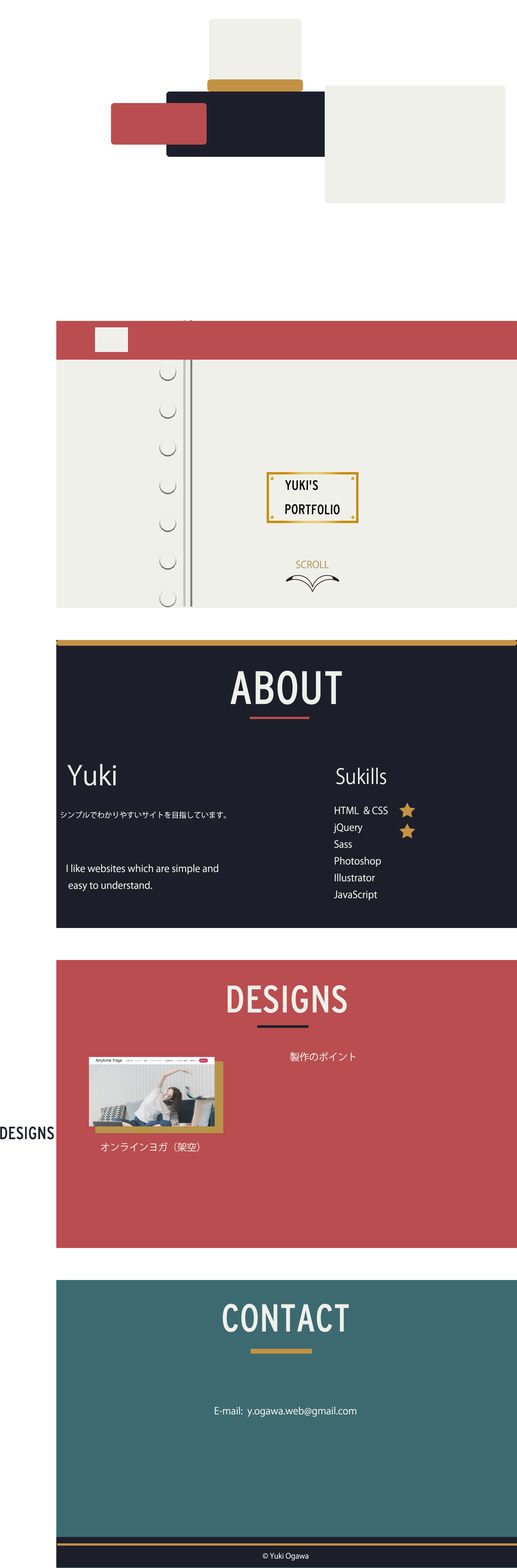
<style>
.page{position:relative;width:517px;height:1568px;background:#ffffff}
.page>*{position:absolute;margin:0}
.t1{font:9.6px "KozGoPr6N-Regular";color:#b5944a}
.t2{font:26.5px "KozGoPr6N-Regular";color:#eff0ea}
.t3{font:9.6px "KozGoPr6N-Regular";color:#eff0ea}
.t4{font:7.4px "KozGoPr6N-Regular";color:#eff0ea}
.t5{font:7.3px "KozGoPr6N-Regular";color:#eff0ea}
</style>
<div class="page">
<p class="t1" style="left:296px;top:561px;width:33px;height:7px">SCROLL</p>
<p class="t2" style="left:67px;top:764px;width:49px;height:22px">Yuki</p>
<p class="t3" style="left:333px;top:806px;width:55px;height:94px">HTML  &amp; CSS<br>jQuery<br>Sass<br>Photoshop<br>Illustrator<br>JavaScript</p>
<p class="t4" style="left:60px;top:811px;width:166px;height:8px">シンプルでわかりやすいサイトを目指しています。</p>
<p class="t3" style="left:67px;top:864px;width:151px;height:27px">I like websites which are simple and<br> easy to understand.</p>
<p class="t3" style="left:290px;top:1052px;width:66px;height:9px">製作のポイント</p>
<p class="t3" style="left:101px;top:1142px;width:98px;height:10px">オンラインヨガ（架空）</p>
<p class="t3" style="left:215px;top:1407px;width:141px;height:10px">E-mail:  y.ogawa.web@gmail.com</p>
<p class="t5" style="left:263px;top:1553px;width:45px;height:8px">© Yuki Ogawa</p>
</div>
